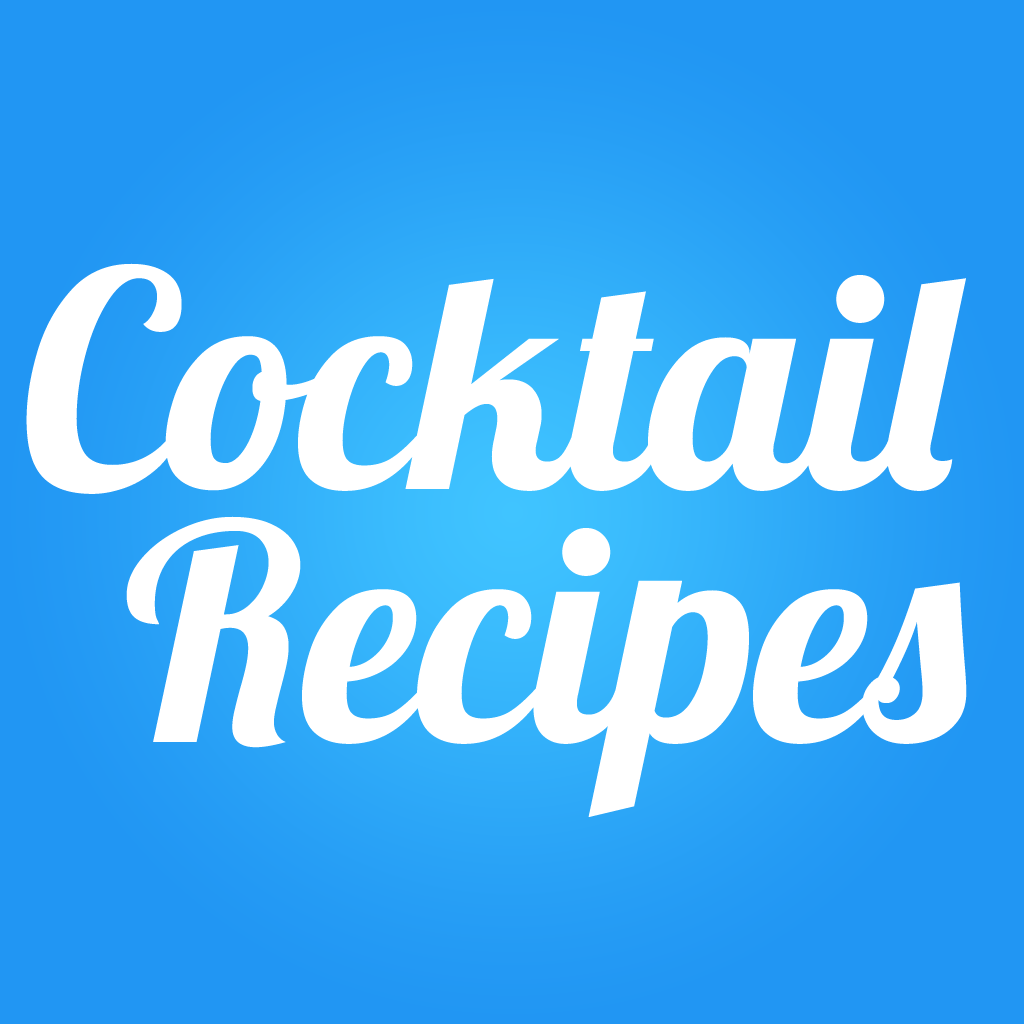
<style>
.page{position:relative;width:1024px;height:1024px;background:#2196f3}
.page>*{position:absolute;margin:0}
.t1{font:300px "Lobster-Regular";color:#ffffff}
</style>
<div class="page">
<p class="t1" style="left:26px;top:263px;width:940px;height:231px">Cocktail</p>
<p class="t1" style="left:126px;top:516px;width:841px;height:301px">Recipes</p>
</div>
